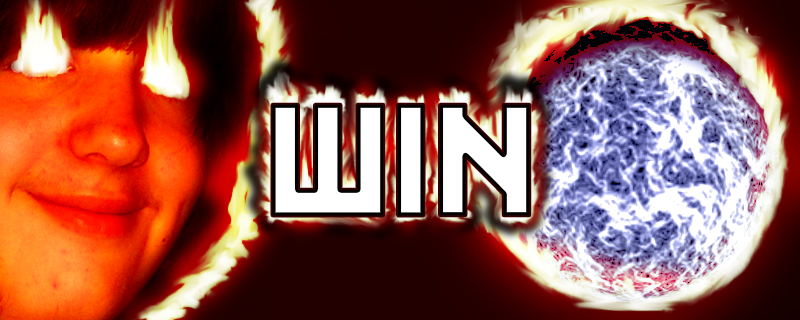
<style>
.page{position:relative;width:800px;height:320px}
.page>*{position:absolute;margin:0}
.t1{font:150px "Kremlin";color:#ffffff}
</style>
<div class="page">
<p class="t1" style="left:272px;top:104px;width:258px;height:112px">WIN</p>
</div>
